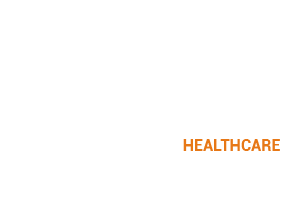
<style>
.page{position:relative;width:300px;height:200px;background:#ffffff}
.page>*{position:absolute;margin:0}
.t1{font:16px "Roboto-Bold";color:#e77817}
</style>
<div class="page">
<p class="t1" style="left:183px;top:139px;width:97px;height:12px">HEALTHCARE</p>
</div>
